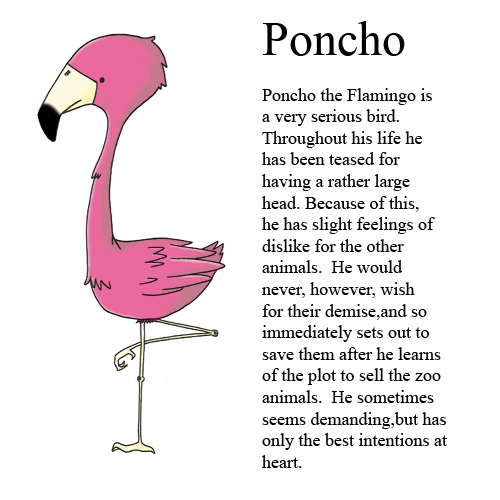
<style>
.page{position:relative;width:500px;height:500px;background:#ffffff}
.page>*{position:absolute;margin:0}
.t1{font:18px "TimesNewRomanPSMT";color:#000000}
.t2{font:48px "TimesNewRomanPSMT";color:#000000}
</style>
<div class="page">
<p class="t1" style="left:262px;top:21px;width:185px;height:447px"><span class="t2">Poncho<br><br></span>Poncho the Flamingo is<br>a very serious bird.  <br>Throughout his life he <br>has been teased for <br>having a rather large <br>head. Because of this, <br>he has slight feelings of <br>dislike for the other<br>animals.  He would <br>never, however, wish <br>for their demise,and so<br>immediately sets out to <br>save them after he learns<br>of the plot to sell the zoo <br>animals.  He sometimes <br>seems demanding,but has <br>only the best intentions at <br>heart.</p>
</div>
